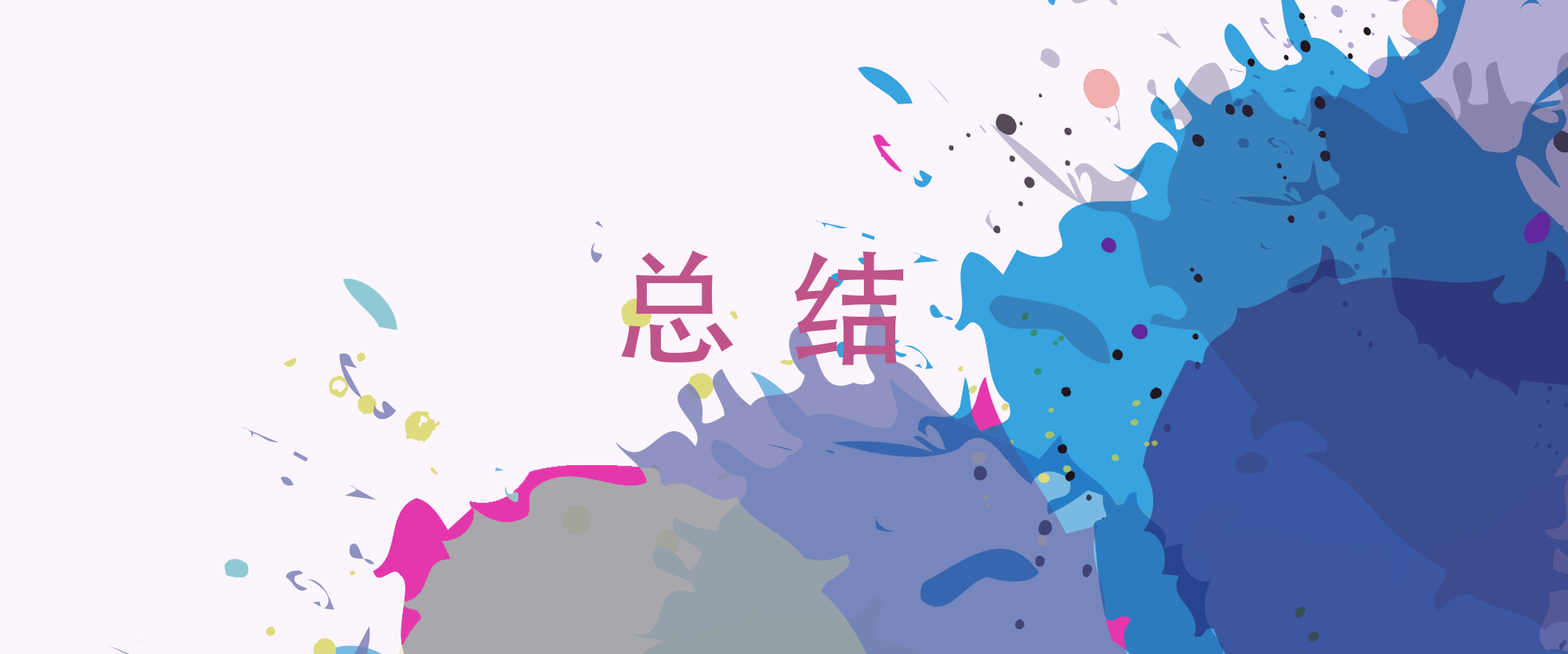
<style>
.page{position:relative;width:1568px;height:654px;background:#fdf5fd}
.page>*{position:absolute;margin:0}
.t1{font:125.4px "AdobeHeitiStd-Regular";letter-spacing:0.075em;color:#bf548a}
</style>
<div class="page">
<p class="t1" style="left:621px;top:250px;width:283px;height:115px">总 结</p>
</div>
